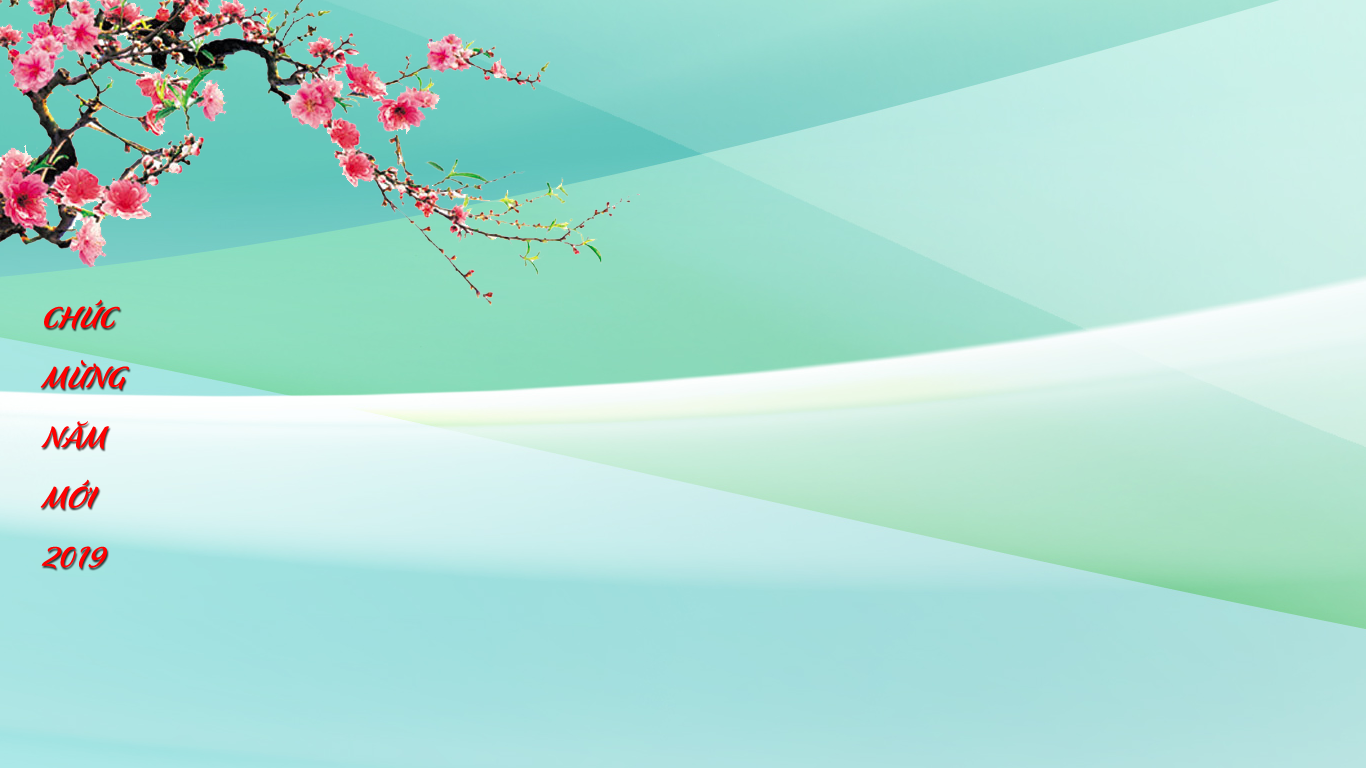
<style>
.page{position:relative;width:1366px;height:768px}
.page>*{position:absolute;margin:0}
.t1{font:30px/60px "UTM-Flavour";color:#ff0000}
</style>
<div class="page">
<p class="t1" style="left:40px;top:299px;width:89px;height:270px">CHÚC<br>MỪNG<br>NĂM<br>MỚI<br>2019</p>
</div>
